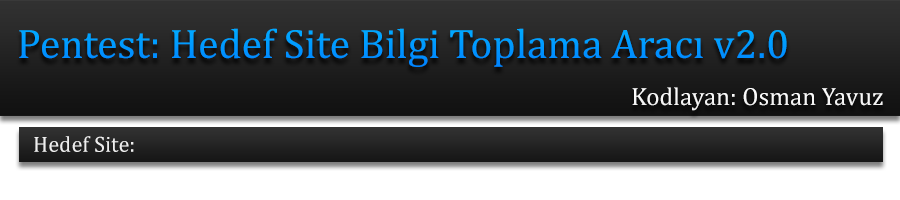
<style>
.page{position:relative;width:900px;height:200px}
.page>*{position:absolute;margin:0}
.t1{font:41.7px "CambriaMath";color:#0090ff}
.t2{font:25px "CambriaMath";color:#fefefe}
.t3{font:22.2px "CambriaMath";color:#eeeeee}
</style>
<div class="page">
<p class="t1" style="left:19px;top:28px;width:768px;height:39px">Pentest: Hedef Site Bilgi Toplama Aracı v2.0</p>
<p class="t2" style="left:632px;top:87px;width:251px;height:24px">Kodlayan: Osman Yavuz</p>
<p class="t3" style="left:34px;top:136px;width:100px;height:16px">Hedef Site:</p>
</div>
